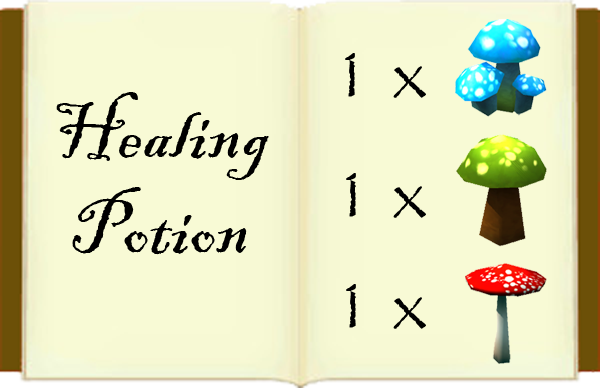
<style>
.page{position:relative;width:600px;height:388px;background:#f8fad5}
.page>*{position:absolute;margin:0}
.t1{font:79px "Papyrus-Regular";color:#000000}
.t2{font:79px "BlackadderITC-Regular";color:#000000}
</style>
<div class="page">
<p class="t1" style="left:345px;top:53px;width:81px;height:45px">1 x</p>
<p class="t2" style="left:56px;top:92px;width:213px;height:163px;text-align:center">Healing<br>Potion</p>
<p class="t1" style="left:346px;top:173px;width:80px;height:45px">1 x</p>
<p class="t1" style="left:346px;top:284px;width:80px;height:45px">1 x</p>
</div>
